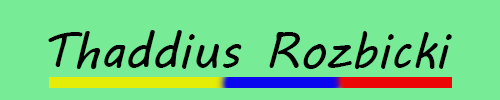
<style>
.page{position:relative;width:500px;height:100px;background:#78eb97}
.page>*{position:absolute;margin:0}
.t1{font:50px "MVBoli";color:#000000}
</style>
<div class="page">
<p class="t1" style="left:48px;top:30px;width:404px;height:39px">Thaddius Rozbicki</p>
</div>
